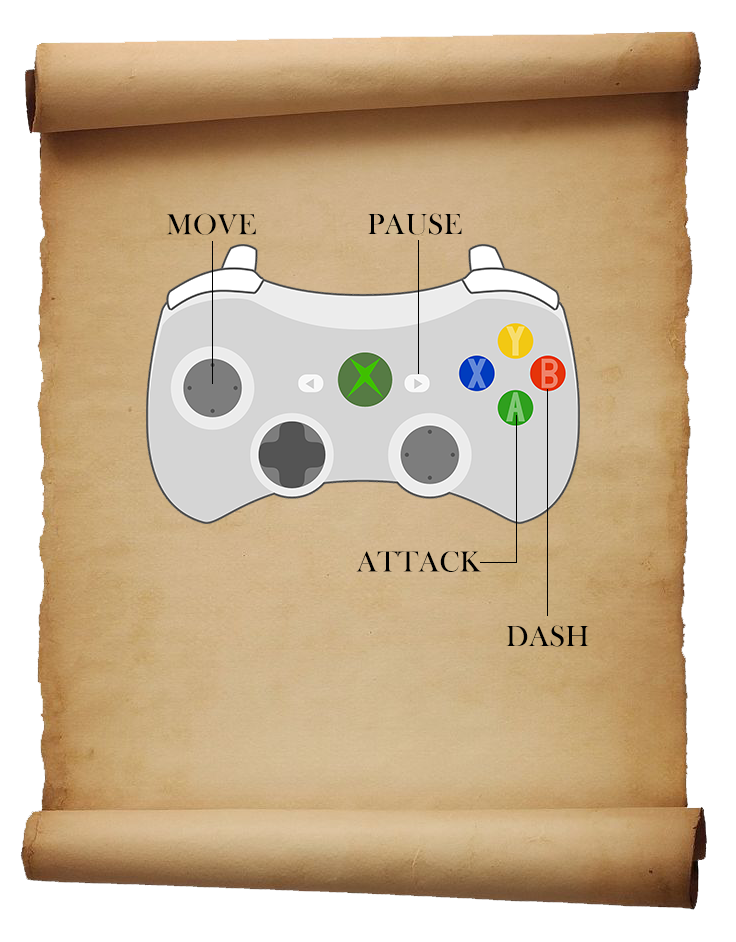
<style>
.page{position:relative;width:736px;height:942px}
.page>*{position:absolute;margin:0}
.t1{font:30px "BaskOldFace";color:#000000}
</style>
<div class="page">
<p class="t1" style="left:166px;top:213px;width:90px;height:22px">MOVE</p>
<p class="t1" style="left:368px;top:213px;width:94px;height:22px">PAUSE</p>
<p class="t1" style="left:356px;top:551px;width:126px;height:21px">ATTACK</p>
<p class="t1" style="left:506px;top:625px;width:83px;height:22px">DASH</p>
</div>
